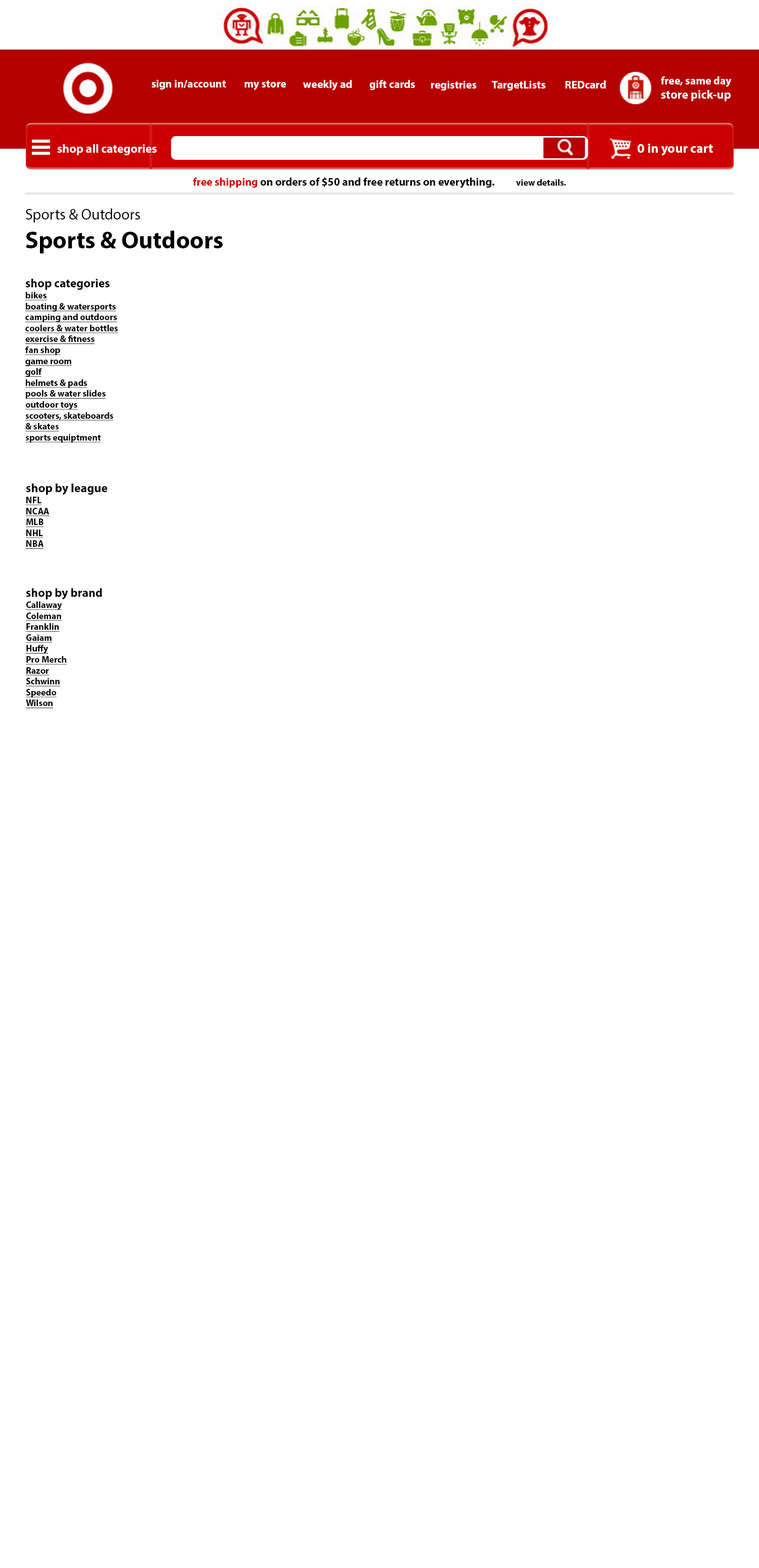
<style>
.page{position:relative;width:759px;height:1568px;background:#ffffff}
.page>*{position:absolute;margin:0}
.t1{font:11.1px "MyriadPro-Bold";color:#fefefe}
.t2{font:12.1px "MyriadPro-Bold";color:#fefefe}
.t3{font:13.2px "MyriadPro-Bold";color:#fefefe}
.t4{font:11.1px "MyriadPro-Bold";color:#000000}
.t5{font:11.1px "MyriadPro-Bold";color:#cc0000}
.t6{font:9.1px "MyriadPro-Bold";color:#000000}
.t7{font:15.2px "MyriadPro-Regular";color:#000000}
.t8{font:24.3px "MyriadPro-Bold";color:#000000}
.t9{font:9.1px "MyriadPro-Bold";color:#000000;text-decoration:underline}
.t10{font:12.1px "MyriadPro-Bold";color:#000000}
</style>
<div class="page">
<p class="t1" style="left:661px;top:76px;width:70px;height:25px">free, same day<br><span class="t2">store pick-up</span></p>
<p class="t1" style="left:151px;top:79px;width:75px;height:11px">sign in/account</p>
<p class="t1" style="left:244px;top:80px;width:42px;height:10px">my store</p>
<p class="t1" style="left:303px;top:80px;width:49px;height:11px">weekly ad</p>
<p class="t1" style="left:369px;top:80px;width:46px;height:10px">gift cards</p>
<p class="t1" style="left:431px;top:80px;width:45px;height:11px">registries</p>
<p class="t1" style="left:492px;top:80px;width:53px;height:11px">TargetLists</p>
<p class="t1" style="left:565px;top:80px;width:40px;height:9px">REDcard</p>
<p class="t2" style="left:57px;top:144px;width:100px;height:11px">shop all categories</p>
<p class="t3" style="left:637px;top:144px;width:76px;height:12px">0 in your cart</p>
<p class="t4" style="left:193px;top:178px;width:373px;height:10px"><span class="t5">free shipping</span> on orders of $50 and free returns on everything.         <span class="t6">view details.</span></p>
<p class="t7" style="left:26px;top:208px;width:197px;height:45px">Sports &amp; Outdoors<br><span class="t8">Sports &amp; Outdoors</span></p>
<p class="t9" style="left:25px;top:279px;width:93px;height:164px"><span class="t10">shop categories<br></span>bikes<br>boating &amp; watersports<br>camping and outdoors<br>coolers &amp; water bottles<br>exercise &amp; fitness<br>fan shop<br>game room<br>golf<br>helmets &amp; pads<br>pools &amp; water slides<br>outdoor toys<br>scooters, skateboards &amp; skates<br>sports equiptment</p>
<p class="t9" style="left:26px;top:484px;width:81px;height:65px"><span class="t10">shop by league<br></span>NFL<br>NCAA<br>MLB<br>NHL<br>NBA</p>
<p class="t9" style="left:26px;top:588px;width:76px;height:121px"><span class="t10">shop by brand<br></span>Callaway<br>Coleman<br>Franklin<br>Gaiam<br>Huffy<br>Pro Merch<br>Razor<br>Schwinn<br>Speedo<br>Wilson</p>
</div>
